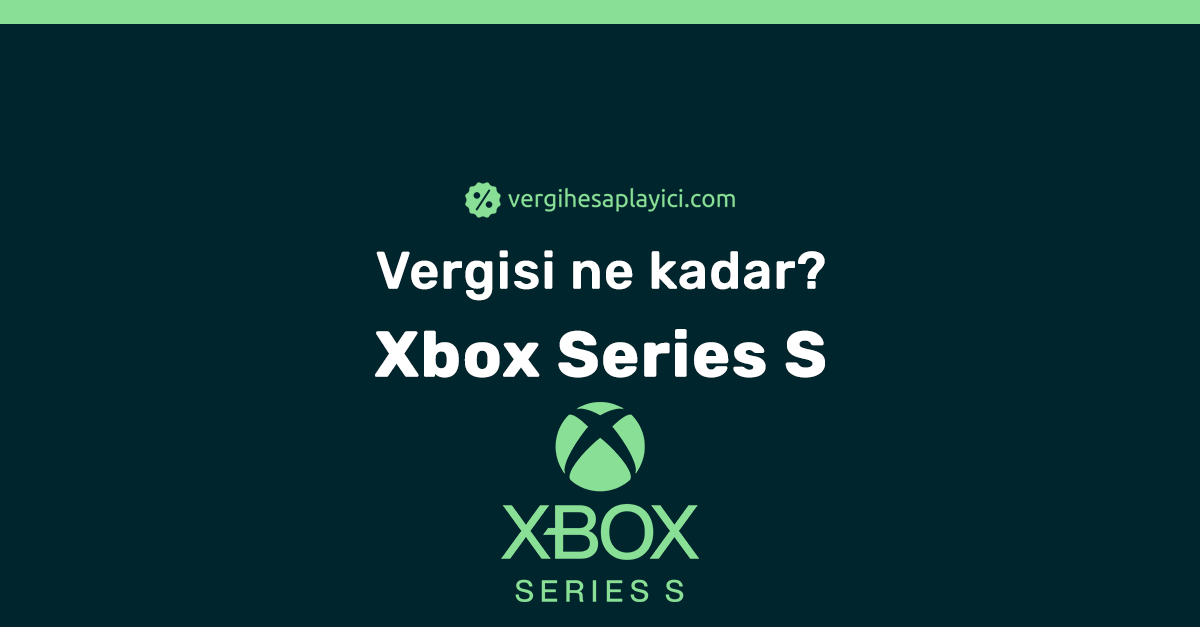
<style>
.page{position:relative;width:1200px;height:627px;background:#01252c}
.page>*{position:absolute;margin:0}
.t1{font:52px/88px "Rubik-Medium";color:#ffffff;font-weight:bold}
.t2{font:64px/88px "Rubik-Bold";color:#ffffff;font-weight:bold}
</style>
<div class="page">
<p class="t1" style="left:375px;top:250px;width:450px;height:128px;text-align:center">Vergisi ne kadar?<br><span class="t2">Xbox Series S</span></p>
</div>
